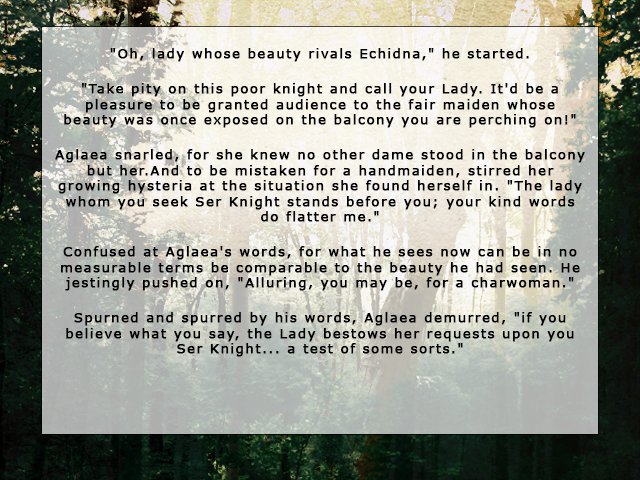
<style>
.page{position:relative;width:640px;height:480px}
.page>*{position:absolute;margin:0}
.t1{font:13px "Verdana";letter-spacing:0.1em;color:#000000;font-weight:bold}
</style>
<div class="page">
<p class="t1" style="left:55px;top:48px;width:530px;height:309px;text-align:center">"Oh, lady whose beauty rivals Echidna," he started. <br><br>"Take pity on this poor knight and call your Lady. It'd be a pleasure to be granted audience to the fair maiden whose beauty was once exposed on the balcony you are perching on!"<br><br>Aglaea snarled, for she knew no other dame stood in the balcony but her.And to be mistaken for a handmaiden, stirred her growing hysteria at the situation she found herself in. "The lady whom you seek Ser Knight stands before you; your kind words do flatter me." <br><br>Confused at Aglaea's words, for what he sees now can be in no measurable terms be comparable to the beauty he had seen. He jestingly pushed on, "Alluring, you may be, for a charwoman."<br><br>Spurned and spurred by his words, Aglaea demurred, "if you believe what you say, the Lady bestows her requests upon you Ser Knight... a test of some sorts."</p>
</div>
